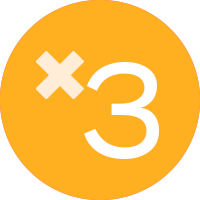
<style>
.page{position:relative;width:200px;height:200px;background:#ffb021}
.page>*{position:absolute;margin:0}
.t1{font:67.8px "icon1";color:#ffedd7}
.t2{font:136px "Stem-Regular";color:#ffffff}
</style>
<div class="page">
<p class="t1" style="left:36px;top:51px;width:48px;height:48px">l</p>
<p class="t2" style="left:84px;top:62px;width:75px;height:97px">3</p>
</div>
